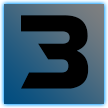
<style>
.page{position:relative;width:108px;height:108px;background:#000000}
.page>*{position:absolute;margin:0}
.t1{font:150px "ROBOTECHGP";color:#000000}
</style>
<div class="page">
<p class="t1" style="left:21px;top:15px;width:68px;height:74px">3</p>
</div>
